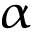
<style>
.page{position:relative;width:32px;height:32px;background:#ffffff}
.page>*{position:absolute;margin:0}
.t1{font:48px "Palatino-Roman";color:#000000}
</style>
<div class="page">
<p class="t1" style="left:2px;top:4px;width:29px;height:25px">α</p>
</div>
